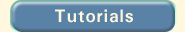
<style>
.page{position:relative;width:185px;height:32px;background:#5982a6}
.page>*{position:absolute;margin:0}
.t1{font:18px "Univers-Bold";letter-spacing:0.05em;color:#fff8de}
</style>
<div class="page">
<p class="t1" style="left:55px;top:9px;width:78px;height:14px">Tutorials</p>
</div>
